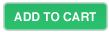
<style>
.page{position:relative;width:109px;height:32px}
.page>*{position:absolute;margin:0}
.t1{font:12px "Helvetica-Bold";color:#ffffff}
</style>
<div class="page">
<p class="t1" style="left:14px;top:12px;width:82px;height:10px">ADD TO CART</p>
</div>
